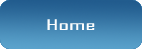
<style>
.page{position:relative;width:142px;height:49px}
.page>*{position:absolute;margin:0}
.t1{font:14px "AgencyFB-Reg";color:#fcfdfd;scale:2 1}
</style>
<div class="page">
<p class="t1" style="left:47px;top:19px;width:48px;height:11px">Home</p>
</div>
